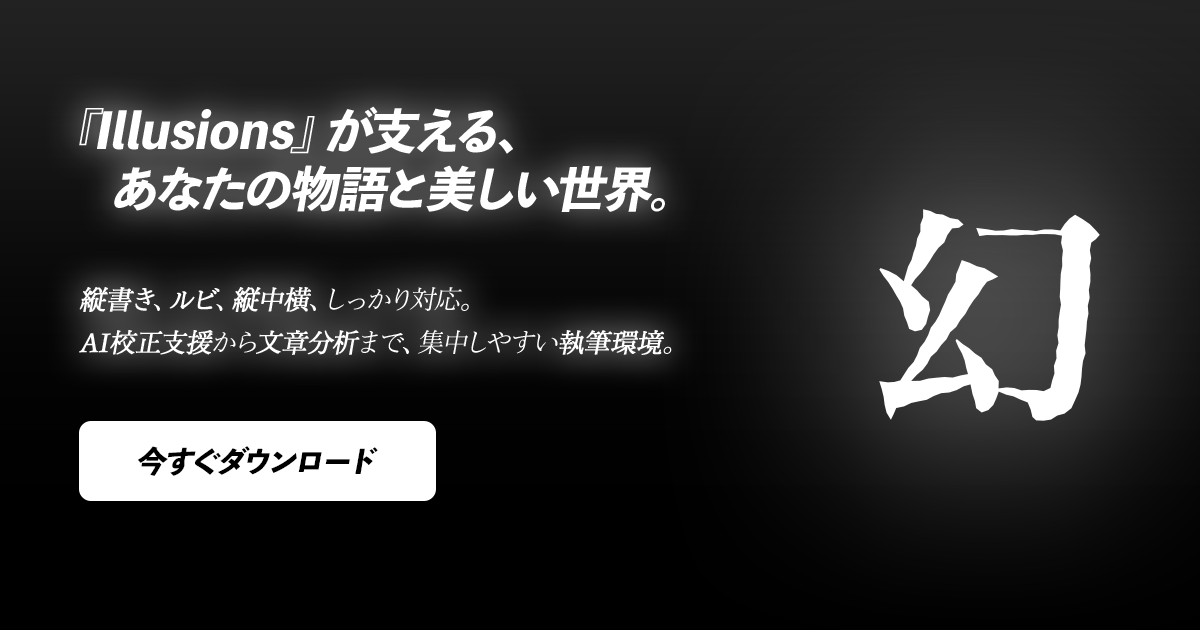
<style>
.page{position:relative;width:1200px;height:630px}
.page>*{position:absolute;margin:0}
.t1{font:48.4px "ToppanBunkyuMidashiGothicStdN-ExtraBold";color:#ffffff;font-style:italic}
.t2{font:26.1px/42.9px "ToppanBunkyuMinchoPr6N-Regular";color:#ffffff;font-style:italic}
.t3{font:26.1px/42.9px "ToppanBunkyuMinchoPr6N-Regular";color:#ffffff;font-weight:bold;font-style:italic}
.t4{font:30.7px "ToppanBunkyuMidashiGothicStdN-ExtraBold";color:#000000;font-style:italic}
</style>
<div class="page">
<p class="t1" style="left:79px;top:106px;width:586px;height:106px">『Illusions』が支える、<br> 　あなたの物語と美しい世界。</p>
<p class="t2" style="left:79px;top:287px;width:593px;height:68px"><span class="t3">縦書き</span>、<span class="t3">ルビ</span>、<span class="t3">縦中横</span>、しっかり対応。<br><span class="t3">AI校正支援</span>から<span class="t3">文章分析</span>まで、集中しやすい<span class="t3">執筆環境</span>。</p>
<p class="t4" style="left:137px;top:446px;width:241px;height:30px">今すぐダウンロード</p>
</div>
